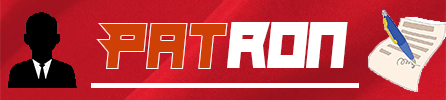
<style>
.page{position:relative;width:446px;height:100px}
.page>*{position:absolute;margin:0}
.t1{font:66.7px "Hindsight2020";color:#cf4007;scale:0.94 1}
.t2{font:66.7px "Hindsight2020";color:#ffffff;scale:0.94 1}
</style>
<div class="page">
<p class="t1" style="left:96px;top:23px;width:132px;height:46px">Pat</p>
<p class="t2" style="left:227px;top:22px;width:121px;height:46px">ron</p>
</div>
